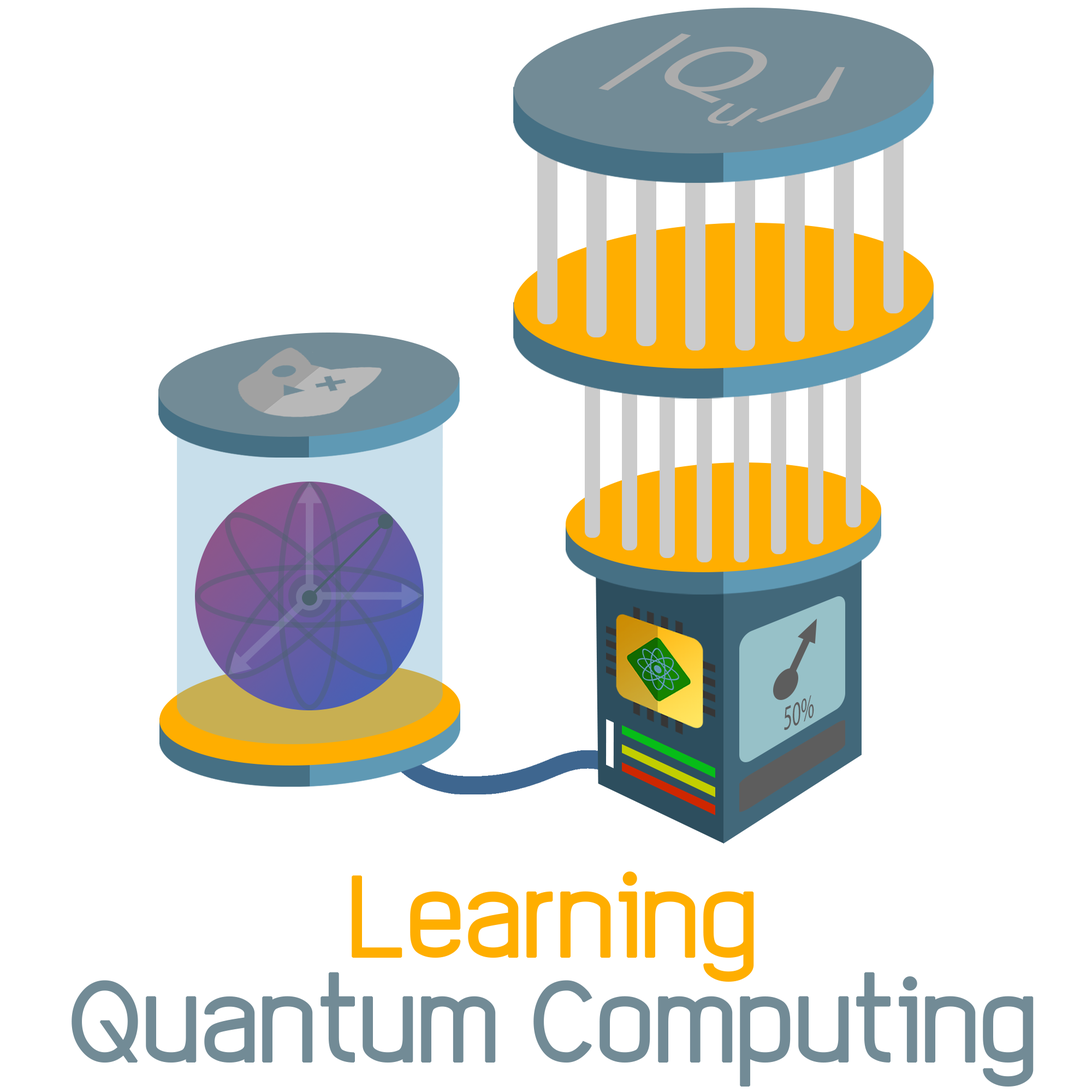
<style>
.page{position:relative;width:1092px;height:1092px;background:#ffffff}
.page>*{position:absolute;margin:0}
.t1{font:109.7px "MyriadPro-Regular";color:#acacac;scale:1.16 1}
.t2{font:109.7px "CambriaMath";color:#acacac;scale:1.16 1}
.t3{font:34.3px "MyriadPro-Regular";color:#5d5d5d;scale:0.55 1}
.t4{font:81.9px/104.6px "EleganTech";color:#728b96;font-weight:bold}
.t5{font:81.9px/104.6px "EleganTech";color:#ffae00;font-weight:bold}
</style>
<div class="page">
<p class="t1" style="left:598px;top:33px;width:247px;height:94px;rotate:12deg"><span class="t2">|</span>Qu<span class="t2">⟩</span></p>
<p class="t3" style="left:784px;top:695px;width:30px;height:35px;rotate:-25deg">50%</p>
<p class="t4" style="left:72px;top:871px;width:962px;height:216px;text-align:center"><span class="t5">Learning<br></span>Quantum Computing</p>
</div>
